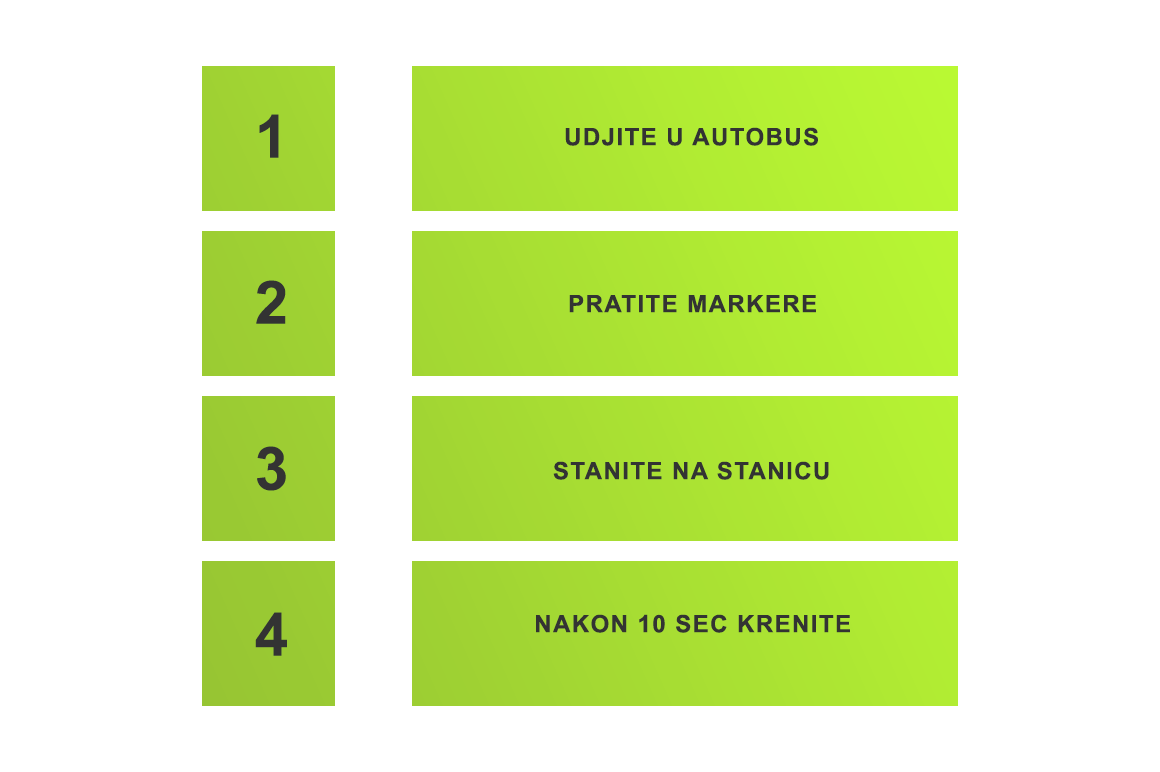
<style>
.page{position:relative;width:1160px;height:772px;background:#ffffff}
.page>*{position:absolute;margin:0}
.t1{font:60px "Arial-BoldMT";letter-spacing:0.06em;color:#333333;text-transform:uppercase}
.t2{font:24px "Arial-BoldMT";letter-spacing:0.06em;color:#333333;text-transform:uppercase}
</style>
<div class="page">
<p class="t1" style="left:259px;top:114px;width:20px;height:44px">1</p>
<p class="t2" style="left:565px;top:127px;width:253px;height:19px">UDJITE U AUTOBUS</p>
<p class="t1" style="left:256px;top:280px;width:30px;height:44px">2</p>
<p class="t2" style="left:569px;top:295px;width:247px;height:18px">PRATITE MARKERE</p>
<p class="t1" style="left:257px;top:446px;width:29px;height:45px">3</p>
<p class="t2" style="left:553px;top:461px;width:276px;height:19px">STANITE NA STANICU</p>
<p class="t1" style="left:255px;top:612px;width:32px;height:44px">4</p>
<p class="t2" style="left:536px;top:614px;width:314px;height:19px">NAKON 10 SEC KRENITE</p>
</div>
